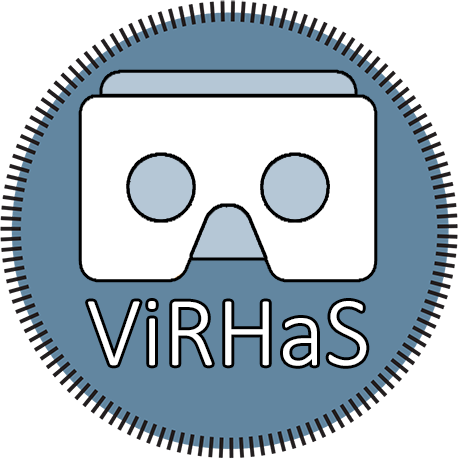
<style>
.page{position:relative;width:458px;height:459px;background:#ffffff}
.page>*{position:absolute;margin:0}
.t1{font:100px "Calibri-Light";color:#ffffff}
</style>
<div class="page">
<p class="t1" style="left:88px;top:301px;width:279px;height:65px">ViRHaS</p>
</div>
